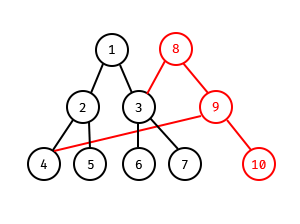
<style>
.page{position:relative;width:300px;height:224px;background:#ffffff}
.page>*{position:absolute;margin:0}
.t1{font:12.5px "FiraCode-Regular";color:#000000}
.t2{font:12.5px "FiraCode-Regular";color:#ff0000}
</style>
<div class="page">
<p class="t1" style="left:109px;top:45px;width:6px;height:9px">1</p>
<p class="t2" style="left:172px;top:44px;width:7px;height:9px">8</p>
<p class="t2" style="left:212px;top:102px;width:7px;height:10px">9</p>
<p class="t1" style="left:79px;top:103px;width:7px;height:9px">2</p>
<p class="t1" style="left:135px;top:103px;width:7px;height:9px">3</p>
<p class="t1" style="left:40px;top:159px;width:7px;height:10px">4</p>
<p class="t1" style="left:87px;top:160px;width:7px;height:9px">5</p>
<p class="t1" style="left:135px;top:160px;width:7px;height:9px">6</p>
<p class="t1" style="left:182px;top:160px;width:6px;height:9px">7</p>
<p class="t2" style="left:252px;top:160px;width:14px;height:9px">10</p>
</div>
